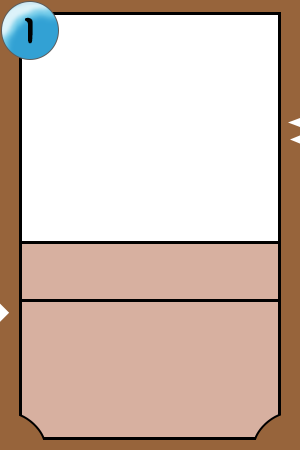
<style>
.page{position:relative;width:300px;height:450px;background:#ffffff}
.page>*{position:absolute;margin:0}
.t1{font:42.6px "TTByulbitchaB";color:#000000;font-weight:bold}
</style>
<div class="page">
<p class="t1" style="left:25px;top:17px;width:8px;height:27px">1</p>
</div>
